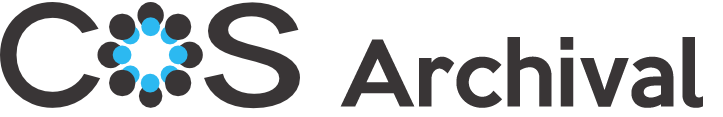
<style>
.page{position:relative;width:723px;height:117px;background:#ffffff}
.page>*{position:absolute;margin:0}
.t1{font:83.7px "KeepCalm-Medium";color:#393536}
</style>
<div class="page">
<p class="t1" style="left:340px;top:37px;width:363px;height:71px">Archival</p>
</div>
